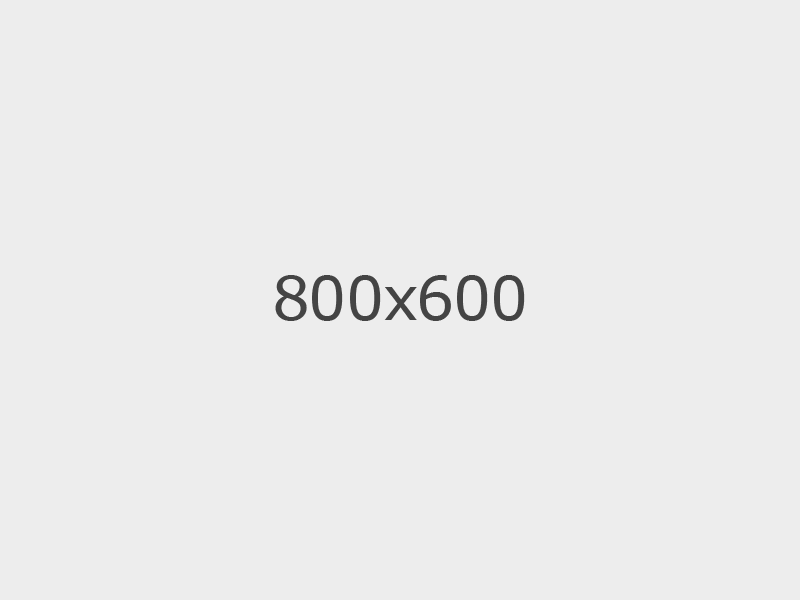
<style>
.page{position:relative;width:800px;height:600px;background:#ededed}
.page>*{position:absolute;margin:0}
.t1{font:60px "Verdana";color:#454545}
</style>
<div class="page">
<p class="t1" style="left:275px;top:275px;width:250px;height:46px">800x600</p>
</div>
